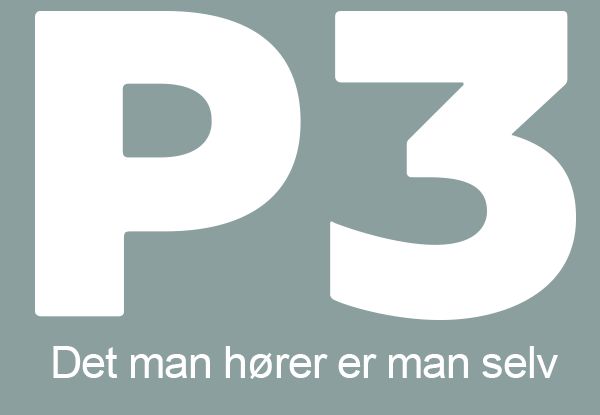
<style>
.page{position:relative;width:600px;height:415px;background:#8b9f9f}
.page>*{position:absolute;margin:0}
.t1{font:45px "ArialMT";letter-spacing:-0.025em;color:#ffffff}
</style>
<div class="page">
<p class="t1" style="left:53px;top:346px;width:505px;height:33px">Det man hører er man selv</p>
</div>
